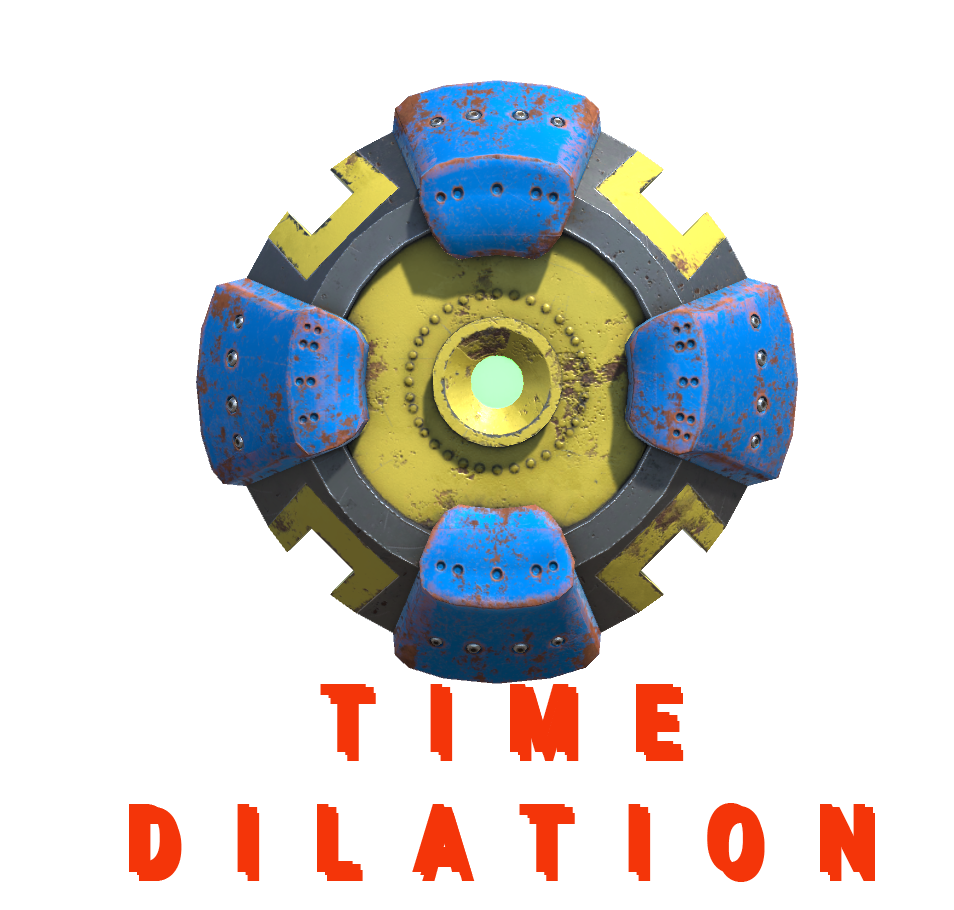
<style>
.page{position:relative;width:954px;height:910px;background:#ffffff}
.page>*{position:absolute;margin:0}
.t1{font:96px/24px "Roboto-Bold";letter-spacing:0.74em;color:#f43509;scale:0.81 1}
</style>
<div class="page">
<p class="t1" style="left:129px;top:684px;width:736px;height:189px;text-align:center">TIME<br><br> <br><br><br>DILATION</p>
<p class="t1" style="left:137px;top:687px;width:736px;height:189px;text-align:center">TIME<br><br> <br><br><br>DILATION</p>
<p class="t1" style="left:139px;top:693px;width:736px;height:189px;text-align:center">TIME<br><br> <br><br><br>DILATION</p>
</div>
